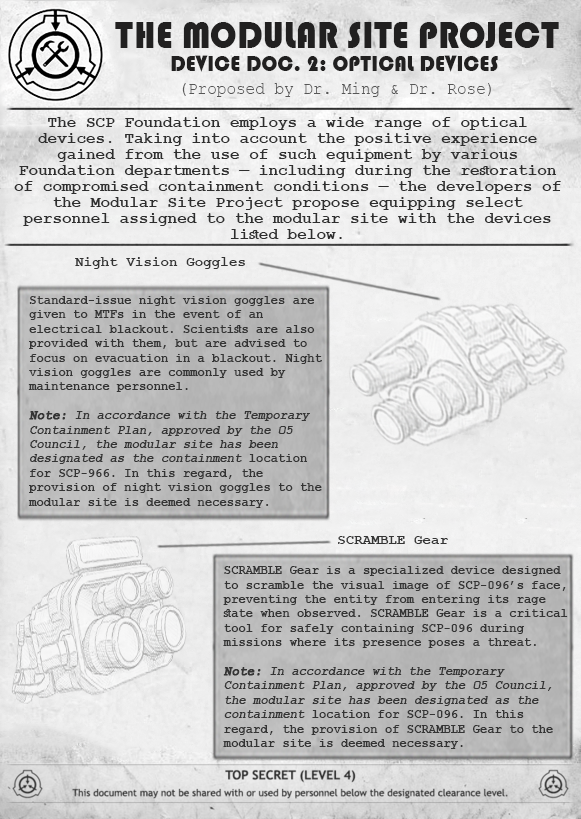
<style>
.page{position:relative;width:581px;height:819px}
.page>*{position:absolute;margin:0}
.t1{font:38.8px "Bauhaus93";letter-spacing:0.01em;color:#212020;scale:0.9 1}
.t2{font:23.2px "Bauhaus93";letter-spacing:0.01em;color:#212020;scale:0.9 1}
.t3{font:23.2px "Bauhaus93";letter-spacing:0.01em;color:#212020;text-transform:uppercase;scale:0.9 1}
.t4{font:17.5px "CourierNewPSMT";letter-spacing:0.01em;color:#575757;scale:0.9 1}
.t5{font:16px/16px "CourierNewPS-BoldMT";color:#2e2e2e}
.t6{font:14px "CourierNewPS-BoldMT";letter-spacing:0.01em;color:#343434}
.t7{font:12px "CourierNewPS-BoldMT";letter-spacing:0.01em;color:#343434}
.t8{font:12px "CourierNewPS-BoldMT";letter-spacing:0.01em;color:#343434;font-weight:bold;font-style:italic}
.t9{font:12px "CourierNewPS-BoldMT";letter-spacing:0.01em;color:#343434;font-style:italic}
</style>
<div class="page">
<p class="t1" style="left:115px;top:22px;width:444px;height:26px">THE MODULAR SITE PROJECT</p>
<p class="t2" style="left:171px;top:55px;width:327px;height:17px"><span class="t3">Device </span>DOC. 2: OPTICAL DEVICES</p>
<p class="t4" style="left:182px;top:82px;width:309px;height:15px">(Proposed by Dr. Ming &amp; Dr. Rose)</p>
<p class="t5" style="left:14px;top:117px;width:547px;height:122px;text-align:center">The SCP Foundation employs a wide range of optical devices. Taking into account the positive experience gained from the use of such equipment by various Foundation departments — including during the restoration of compromised containment conditions — the developers of the Modular Site Project propose equipping select personnel assigned to the modular site with the devices listed below.</p>
<p class="t6" style="left:75px;top:257px;width:170px;height:12px">Night Vision Goggles</p>
<p class="t7" style="left:28px;top:296px;width:294px;height:212px">Standard-issue night vision goggles are given to MTFs in the event of an electrical blackout. Scientists are also provided with them, but are advised to focus on evacuation in a blackout. Night vision goggles are commonly used by maintenance personnel.<br><br><span class="t8">Note:</span><span class="t9"> In accordance with the Temporary Containment Plan, approved by the O5 Council, the modular site has been designated as the containment </span>location for SCP-966. In this regard, the provision of night vision goggles to the modular site is deemed necessary.</p>
<p class="t6" style="left:338px;top:536px;width:110px;height:8px">SCRAMBLE Gear</p>
<p class="t7" style="left:223px;top:566px;width:345px;height:183px">SCRAMBLE Gear is a specialized device designed to scramble the visual image of SCP-096’s face, preventing the entity from entering its rage state when observed. SCRAMBLE Gear is a critical tool for safely containing SCP-096 during missions where its presence poses a threat.<br><br><span class="t8">Note:</span><span class="t9"> In accordance with the Temporary Containment Plan, approved by the O5 Council, the modular site has been designated as the containment </span>location for SCP-096. In this regard, the provision of SCRAMBLE Gear to the modular site is deemed necessary.</p>
</div>
